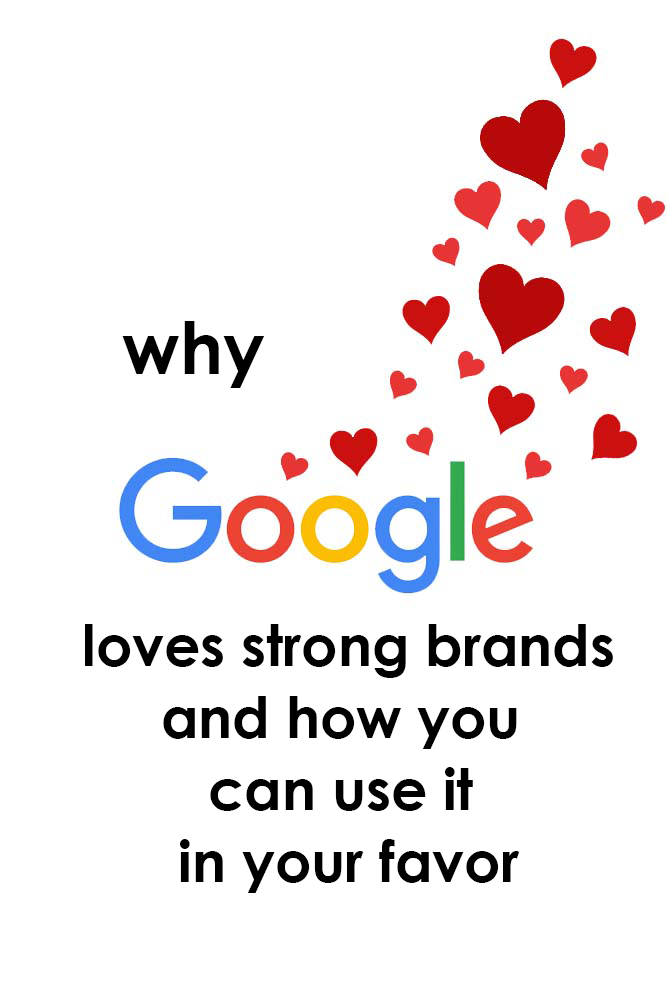
<style>
.page{position:relative;width:667px;height:1000px;background:#ffffff}
.page>*{position:absolute;margin:0}
.t1{font:72px "CenturyGothic-Bold";color:#000000}
.t2{font:56.7px/72px "CenturyGothic-Bold";color:#000000}
</style>
<div class="page">
<p class="t1" style="left:122px;top:321px;width:142px;height:67px">why</p>
<p class="t2" style="left:85px;top:624px;width:528px;height:269px;text-align:center">loves strong brands<br>and how you <br>can use it <br>in your favor</p>
</div>
